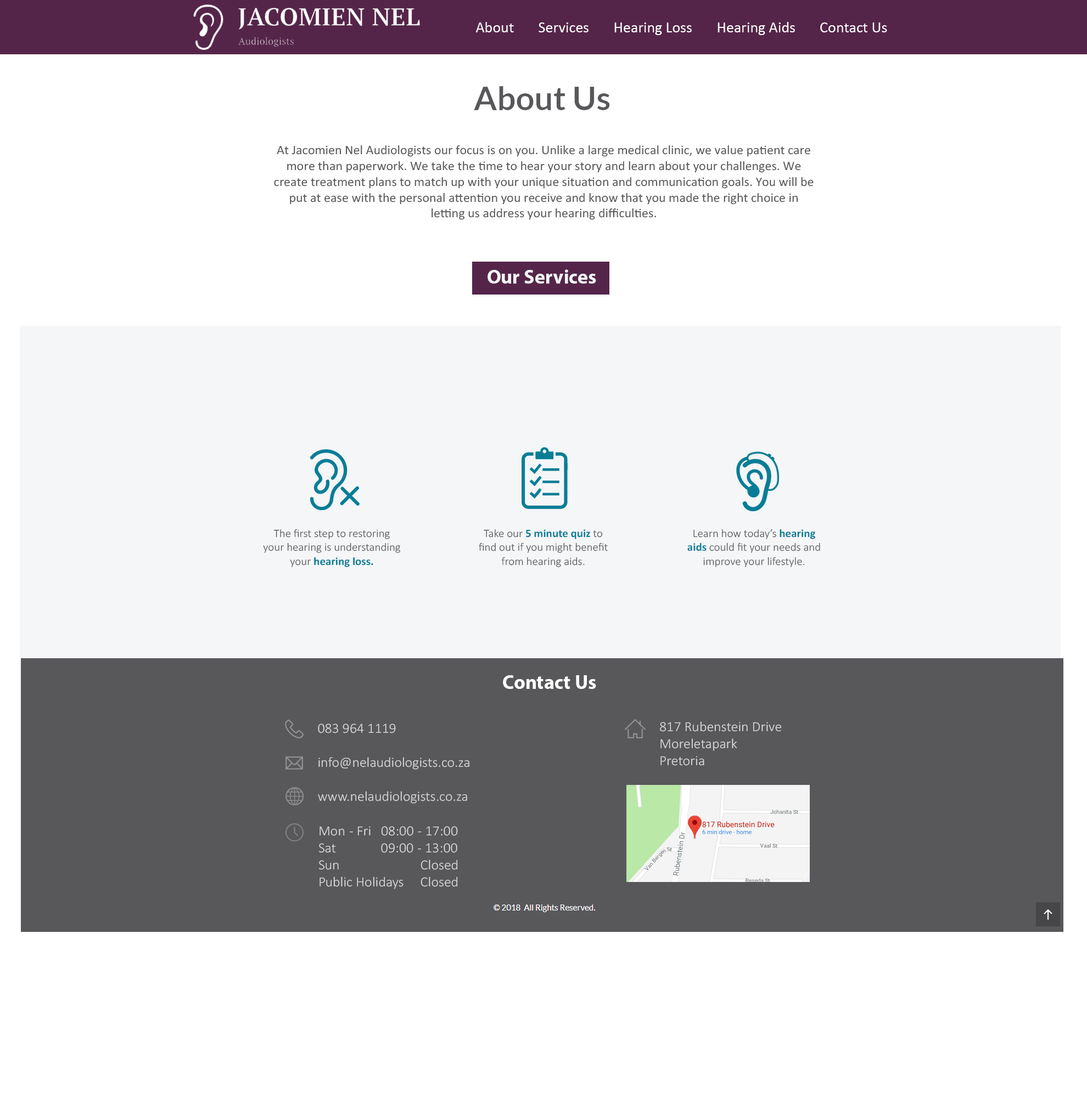
<style>
.page{position:relative;width:1087px;height:1097px;background:#ffffff}
.page>*{position:absolute;margin:0}
.t1{font:15.4px "Calibri";color:#ffffff}
.t2{font:12.9px "Calibri";color:#58585b}
.t3{font:19.8px "MyriadPro-Bold";color:#f4f6f8}
.t4{font:11.3px "Calibri-Light";color:#58585b}
.t5{font:11.3px "Calibri-Bold";color:#097d96}
.t6{font:19.8px "MyriadPro-Bold";color:#ffffff}
.t7{font:14px "Calibri-Light";color:#d8d8d8}
</style>
<div class="page">
<p class="t1" style="left:476px;top:22px;width:411px;height:13px">About       Services       Hearing Loss       Hearing Aids       Contact Us</p>
<p class="t2" style="left:274px;top:145px;width:539px;height:75px;text-align:center">At Jacomien Nel Audiologists our focus is on you. Unlike a large medical clinic, we value patient care more than paperwork. We take the time to hear your story and learn about your challenges. We create treatment plans to match up with your unique situation and communication goals. You will be put at ease with the personal attention you receive and know that you made the right choice in letting us address your hearing difficulties.</p>
<p class="t3" style="left:487px;top:269px;width:109px;height:15px">Our Services</p>
<p class="t4" style="left:263px;top:529px;width:137px;height:38px;text-align:center">The first step to restoring your hearing is understanding your <span class="t5">hearing loss.</span></p>
<p class="t4" style="left:479px;top:529px;width:128px;height:38px;text-align:center">Take our <span class="t5">5 minute quiz </span>to find out if you might benefit from hearing aids.</p>
<p class="t4" style="left:687px;top:529px;width:133px;height:38px;text-align:center">Learn how today’s <span class="t5">hearing aids</span> could fit your needs and improve your lifestyle.</p>
<p class="t6" style="left:503px;top:676px;width:93px;height:13px">Contact Us</p>
<p class="t7" style="left:318px;top:724px;width:151px;height:166px">083 964 1119<br><br>              info@nelaudiologists.co.za<br><br>              www.nelaudiologists.co.za<br><br>    Mon  - Fri   08:00  - 17:00<br>    Sat        09:00  - 13:00<br>    Sun          Closed<br>    Public Holidays    Closed</p>
<p class="t7" style="left:660px;top:722px;width:121px;height:44px">817 Rubenstein Drive<br>Moreletapark<br>Pretoria</p>
</div>
